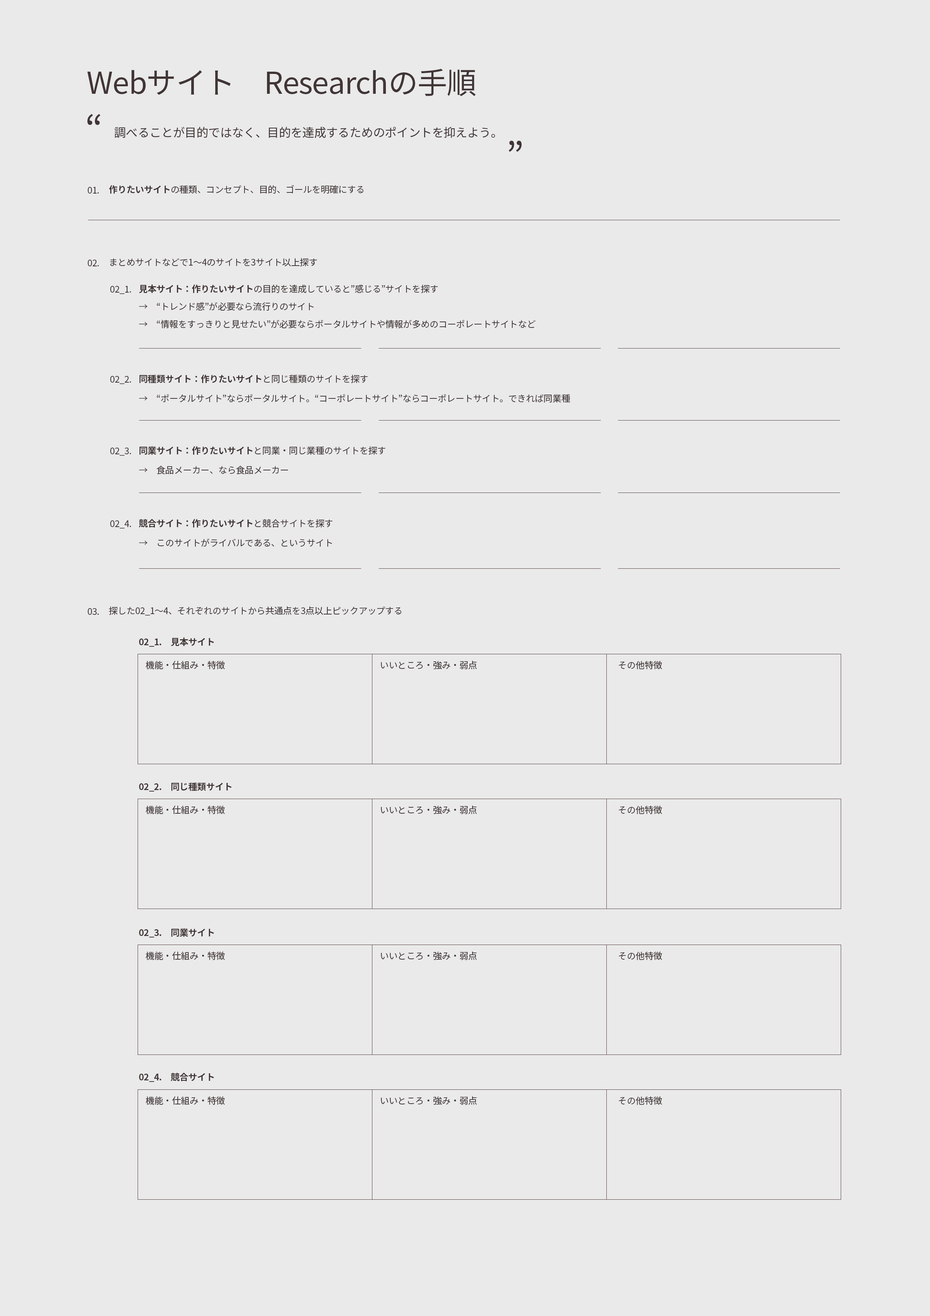
<style>
.page{position:relative;width:930px;height:1316px;background:#eaeaea}
.page>*{position:absolute;margin:0}
.t1{font:30px "NotoSansJP-Regular";letter-spacing:-0.019em;color:#413535}
.t2{font:37.5px "NotoSansJP-Regular";letter-spacing:-0.019em;color:#413535}
.t3{font:12px "NotoSansJP-Regular";letter-spacing:-0.019em;color:#413535}
.t4{font:9px "NotoSansJP-Regular";letter-spacing:-0.019em;color:#413535}
.t5{font:9px "NotoSansJP-Bold";letter-spacing:-0.019em;color:#413535}
</style>
<div class="page">
<p class="t1" style="left:87px;top:69px;width:389px;height:27px">Webサイト　Researchの手順</p>
<p class="t2" style="left:87px;top:114px;width:435px;height:38px">“                                          　　 ”</p>
<p class="t3" style="left:114px;top:127px;width:381px;height:11px">調べることが目的ではなく、目的を達成するためのポイントを抑えよう。</p>
<p class="t4" style="left:109px;top:185px;width:254px;height:9px"><span class="t5">作りたいサイト</span>の種類、コンセプト、目的、ゴールを明確にする</p>
<p class="t4" style="left:88px;top:187px;width:11px;height:7px">01.</p>
<p class="t4" style="left:110px;top:258px;width:207px;height:8px">まとめサイトなどで1〜4のサイトを3サイト以上探す</p>
<p class="t4" style="left:88px;top:260px;width:11px;height:6px">02.</p>
<p class="t4" style="left:110px;top:286px;width:21px;height:8px">02_1.</p>
<p class="t4" style="left:139px;top:284px;width:299px;height:9px"><span class="t5">見本サイト：作りたいサイト</span>の目的を達成していると”感じる”サイトを探す</p>
<p class="t4" style="left:139px;top:302px;width:175px;height:9px">→　“トレンド感”が必要なら流行りのサイト</p>
<p class="t4" style="left:139px;top:320px;width:397px;height:8px">→　“情報をすっきりと見せたい”が必要ならポータルサイトや情報が多めのコーポレートサイトなど</p>
<p class="t4" style="left:110px;top:376px;width:21px;height:8px">02_2.</p>
<p class="t5" style="left:140px;top:374px;width:228px;height:9px">同種類サイト：作りたいサイト<span class="t4">と同じ種類のサイトを探す</span></p>
<p class="t4" style="left:139px;top:394px;width:431px;height:8px">→　“ポータルサイト”ならポータルサイト。“コーポレートサイト”ならコーポレートサイト。できれば同業種</p>
<p class="t4" style="left:110px;top:447px;width:21px;height:9px">02_3.</p>
<p class="t4" style="left:140px;top:446px;width:246px;height:9px"><span class="t5">同業サイト：作りたいサイト</span>と同業・同じ業種のサイトを探す</p>
<p class="t4" style="left:139px;top:465px;width:149px;height:9px">→　食品メーカー、なら食品メーカー</p>
<p class="t4" style="left:110px;top:520px;width:21px;height:8px">02_4.</p>
<p class="t5" style="left:139px;top:519px;width:194px;height:8px">競合サイト：作りたいサイト<span class="t4">と競合サイトを探す</span></p>
<p class="t4" style="left:139px;top:538px;width:193px;height:9px">→　このサイトがライバルである、というサイト</p>
<p class="t4" style="left:109px;top:606px;width:292px;height:9px">探した02_1〜4、それぞれのサイトから共通点を3点以上ピックアップする</p>
<p class="t4" style="left:88px;top:608px;width:11px;height:7px">03.</p>
<p class="t5" style="left:139px;top:637px;width:75px;height:9px">02_1.　見本サイト</p>
<p class="t4" style="left:146px;top:660px;width:79px;height:9px">機能・仕組み・特徴</p>
<p class="t4" style="left:381px;top:660px;width:96px;height:9px">いいところ・強み・弱点</p>
<p class="t4" style="left:619px;top:660px;width:43px;height:9px">その他特徴</p>
<p class="t5" style="left:139px;top:782px;width:93px;height:9px">02_2.　同じ種類サイト</p>
<p class="t4" style="left:146px;top:805px;width:79px;height:9px">機能・仕組み・特徴</p>
<p class="t4" style="left:381px;top:805px;width:96px;height:9px">いいところ・強み・弱点</p>
<p class="t4" style="left:619px;top:805px;width:43px;height:9px">その他特徴</p>
<p class="t5" style="left:139px;top:928px;width:75px;height:9px">02_3.　同業サイト</p>
<p class="t4" style="left:146px;top:951px;width:79px;height:9px">機能・仕組み・特徴</p>
<p class="t4" style="left:381px;top:951px;width:96px;height:9px">いいところ・強み・弱点</p>
<p class="t4" style="left:619px;top:951px;width:43px;height:9px">その他特徴</p>
<p class="t5" style="left:139px;top:1072px;width:75px;height:10px">02_4.　競合サイト</p>
<p class="t4" style="left:146px;top:1096px;width:79px;height:8px">機能・仕組み・特徴</p>
<p class="t4" style="left:381px;top:1096px;width:96px;height:8px">いいところ・強み・弱点</p>
<p class="t4" style="left:619px;top:1096px;width:43px;height:9px">その他特徴</p>
</div>
